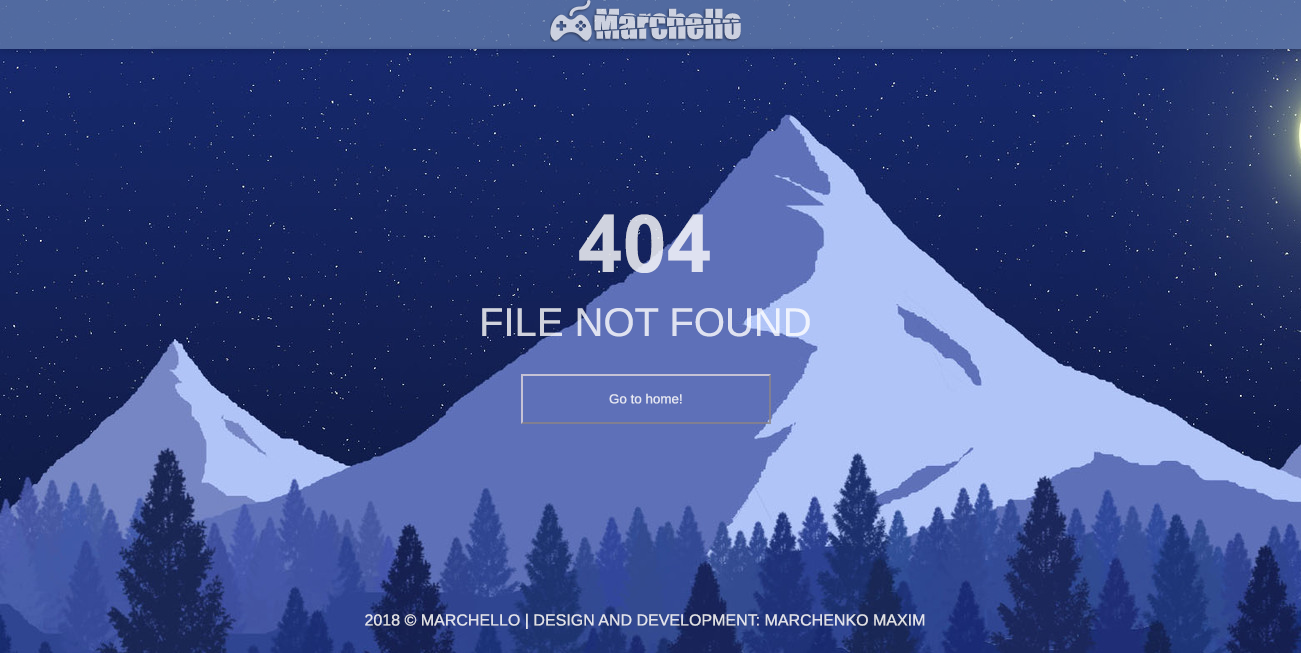
<style>
.page{position:relative;width:1301px;height:653px}
.page>*{position:absolute;margin:0}
.t1{font:80px "Arial-BoldMT";color:#d0d3df}
.t2{font:40px "WineArial";color:#dfe2f1}
.t3{font:13px "WineArial";color:#e5e7f2}
.t4{font:16px "WineArial";color:#dfe1e8}
</style>
<div class="page">
<p class="t1" style="left:579px;top:214px;width:131px;height:59px">404</p>
<p class="t2" style="left:482px;top:308px;width:328px;height:29px">FILE NOT FOUND</p>
<p class="t3" style="left:609px;top:393px;width:73px;height:11px">Go to home!</p>
<p class="t4" style="left:365px;top:613px;width:560px;height:16px">2018 © MARCHELLO | DESIGN AND DEVELOPMENT: MARCHENKO MAXIM</p>
</div>
